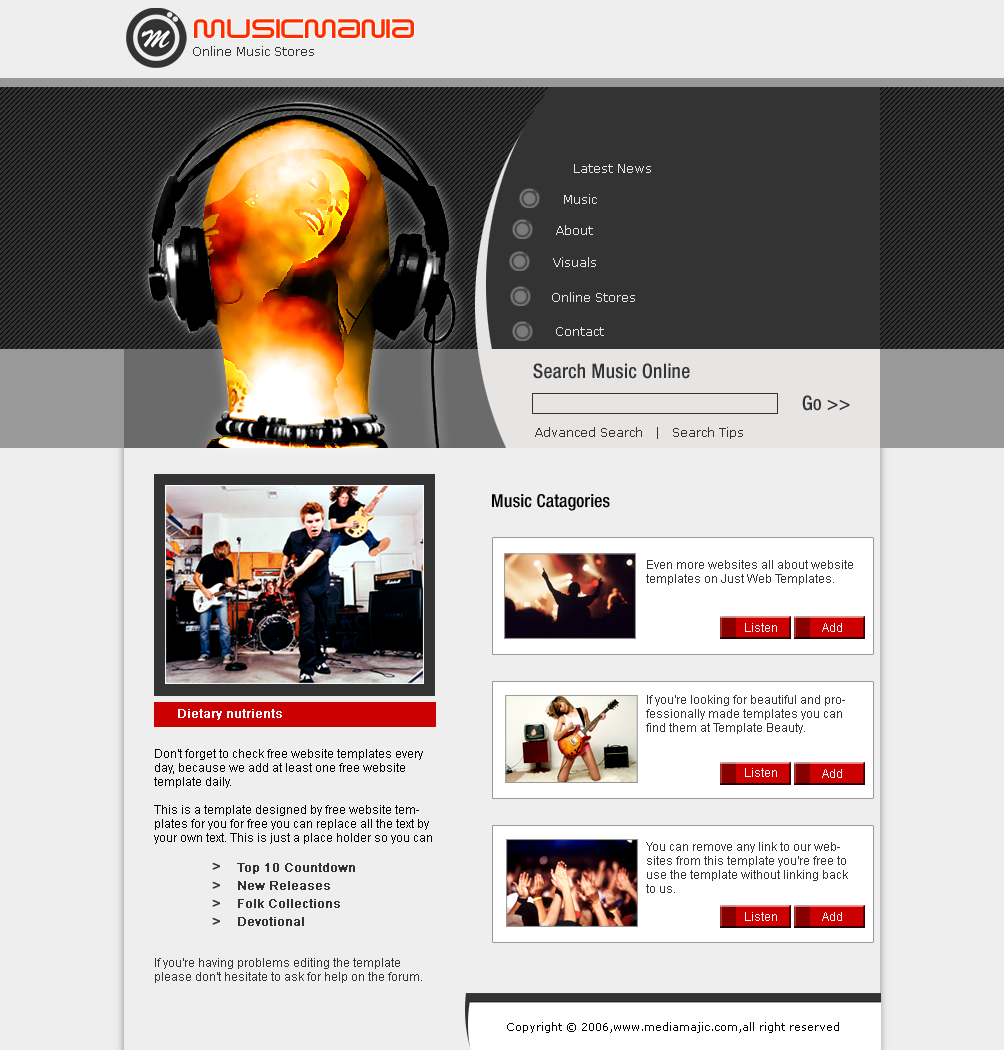
<style>
.page{position:relative;width:1004px;height:1050px;background:#eeeeee}
.page>*{position:absolute;margin:0}
.t1{font:32px "SavedByZero";color:#fd2e00}
.t2{font:12px "Verdana";color:#333333}
.t3{font:12px "Verdana";color:#e7e4e4}
.t4{font:20px "HelveticaNeue-MediumCond";color:#333333}
.t5{font:18px "HelveticaNeue-MediumCond";color:#000000}
.t6{font:12px/14px "ArialMT";color:#333333}
.t7{font:12px "ArialMT";color:#ffffff}
.t8{font:12px "ArialMT";color:#ffffff;font-weight:bold}
.t9{font:12px/14px "ArialMT";color:#000000}
.t10{font:14px "ArialMT";color:#333333;font-weight:bold}
.t11{font:12px/18px "ArialMT";color:#333333;font-weight:bold}
.t12{font:11px "Verdana";color:#000000}
</style>
<div class="page">
<p class="t1" style="left:194px;top:19px;width:220px;height:19px">Musicmania</p>
<p class="t2" style="left:193px;top:46px;width:121px;height:10px">Online Music Stores</p>
<p class="t3" style="left:574px;top:164px;width:77px;height:9px">Latest News</p>
<p class="t3" style="left:564px;top:194px;width:33px;height:10px">Music</p>
<p class="t3" style="left:556px;top:225px;width:37px;height:10px">About</p>
<p class="t3" style="left:553px;top:257px;width:43px;height:10px">Visuals</p>
<p class="t3" style="left:552px;top:292px;width:83px;height:10px">Online Stores</p>
<p class="t3" style="left:556px;top:327px;width:48px;height:9px">Contact</p>
<p class="t4" style="left:533px;top:363px;width:157px;height:16px">Search Music Online</p>
<p class="t4" style="left:802px;top:395px;width:48px;height:16px">Go &gt;&gt;</p>
<p class="t2" style="left:535px;top:427px;width:208px;height:12px">Advanced Search   |   Search Tips</p>
<p class="t5" style="left:492px;top:494px;width:118px;height:17px">Music Catagories</p>
<p class="t6" style="left:646px;top:560px;width:207px;height:25px">Even more websites all about website templates on Just Web Templates.</p>
<p class="t7" style="left:745px;top:623px;width:32px;height:9px">Listen</p>
<p class="t7" style="left:822px;top:623px;width:20px;height:9px">Add</p>
<p class="t6" style="left:646px;top:695px;width:199px;height:39px">If you're looking for beautiful and professionally made templates you can find them at Template Beauty.</p>
<p class="t8" style="left:178px;top:709px;width:104px;height:11px">Dietary nutrients</p>
<p class="t9" style="left:154px;top:749px;width:278px;height:95px">Don't forget to check free website templates every day, because we add at least one free website template daily.<br><br>This is a template designed by free website templates for you for free you can replace all the text by your own text. This is just a place holder so you can see how the site would look like.</p>
<p class="t7" style="left:745px;top:768px;width:32px;height:9px">Listen</p>
<p class="t7" style="left:822px;top:769px;width:20px;height:9px">Add</p>
<p class="t6" style="left:646px;top:842px;width:202px;height:51px">You can remove any link to our websites from this template you're free to use the template without linking back to us.</p>
<p class="t10" style="left:212px;top:862px;width:8px;height:8px">&gt;</p>
<p class="t11" style="left:237px;top:863px;width:118px;height:63px">Top 10 Countdown<br>New Releases<br>Folk Collections<br>Devotional</p>
<p class="t10" style="left:212px;top:881px;width:8px;height:8px">&gt;</p>
<p class="t10" style="left:212px;top:899px;width:8px;height:8px">&gt;</p>
<p class="t10" style="left:212px;top:917px;width:8px;height:8px">&gt;</p>
<p class="t7" style="left:745px;top:912px;width:32px;height:9px">Listen</p>
<p class="t7" style="left:822px;top:912px;width:20px;height:9px">Add</p>
<p class="t6" style="left:155px;top:958px;width:267px;height:25px">If you're having problems editing the template please don't hesitate to ask for help on the forum.</p>
<p class="t12" style="left:507px;top:1022px;width:332px;height:11px">Copyright © 2006,www.mediamajic.com,all right reserved</p>
</div>
